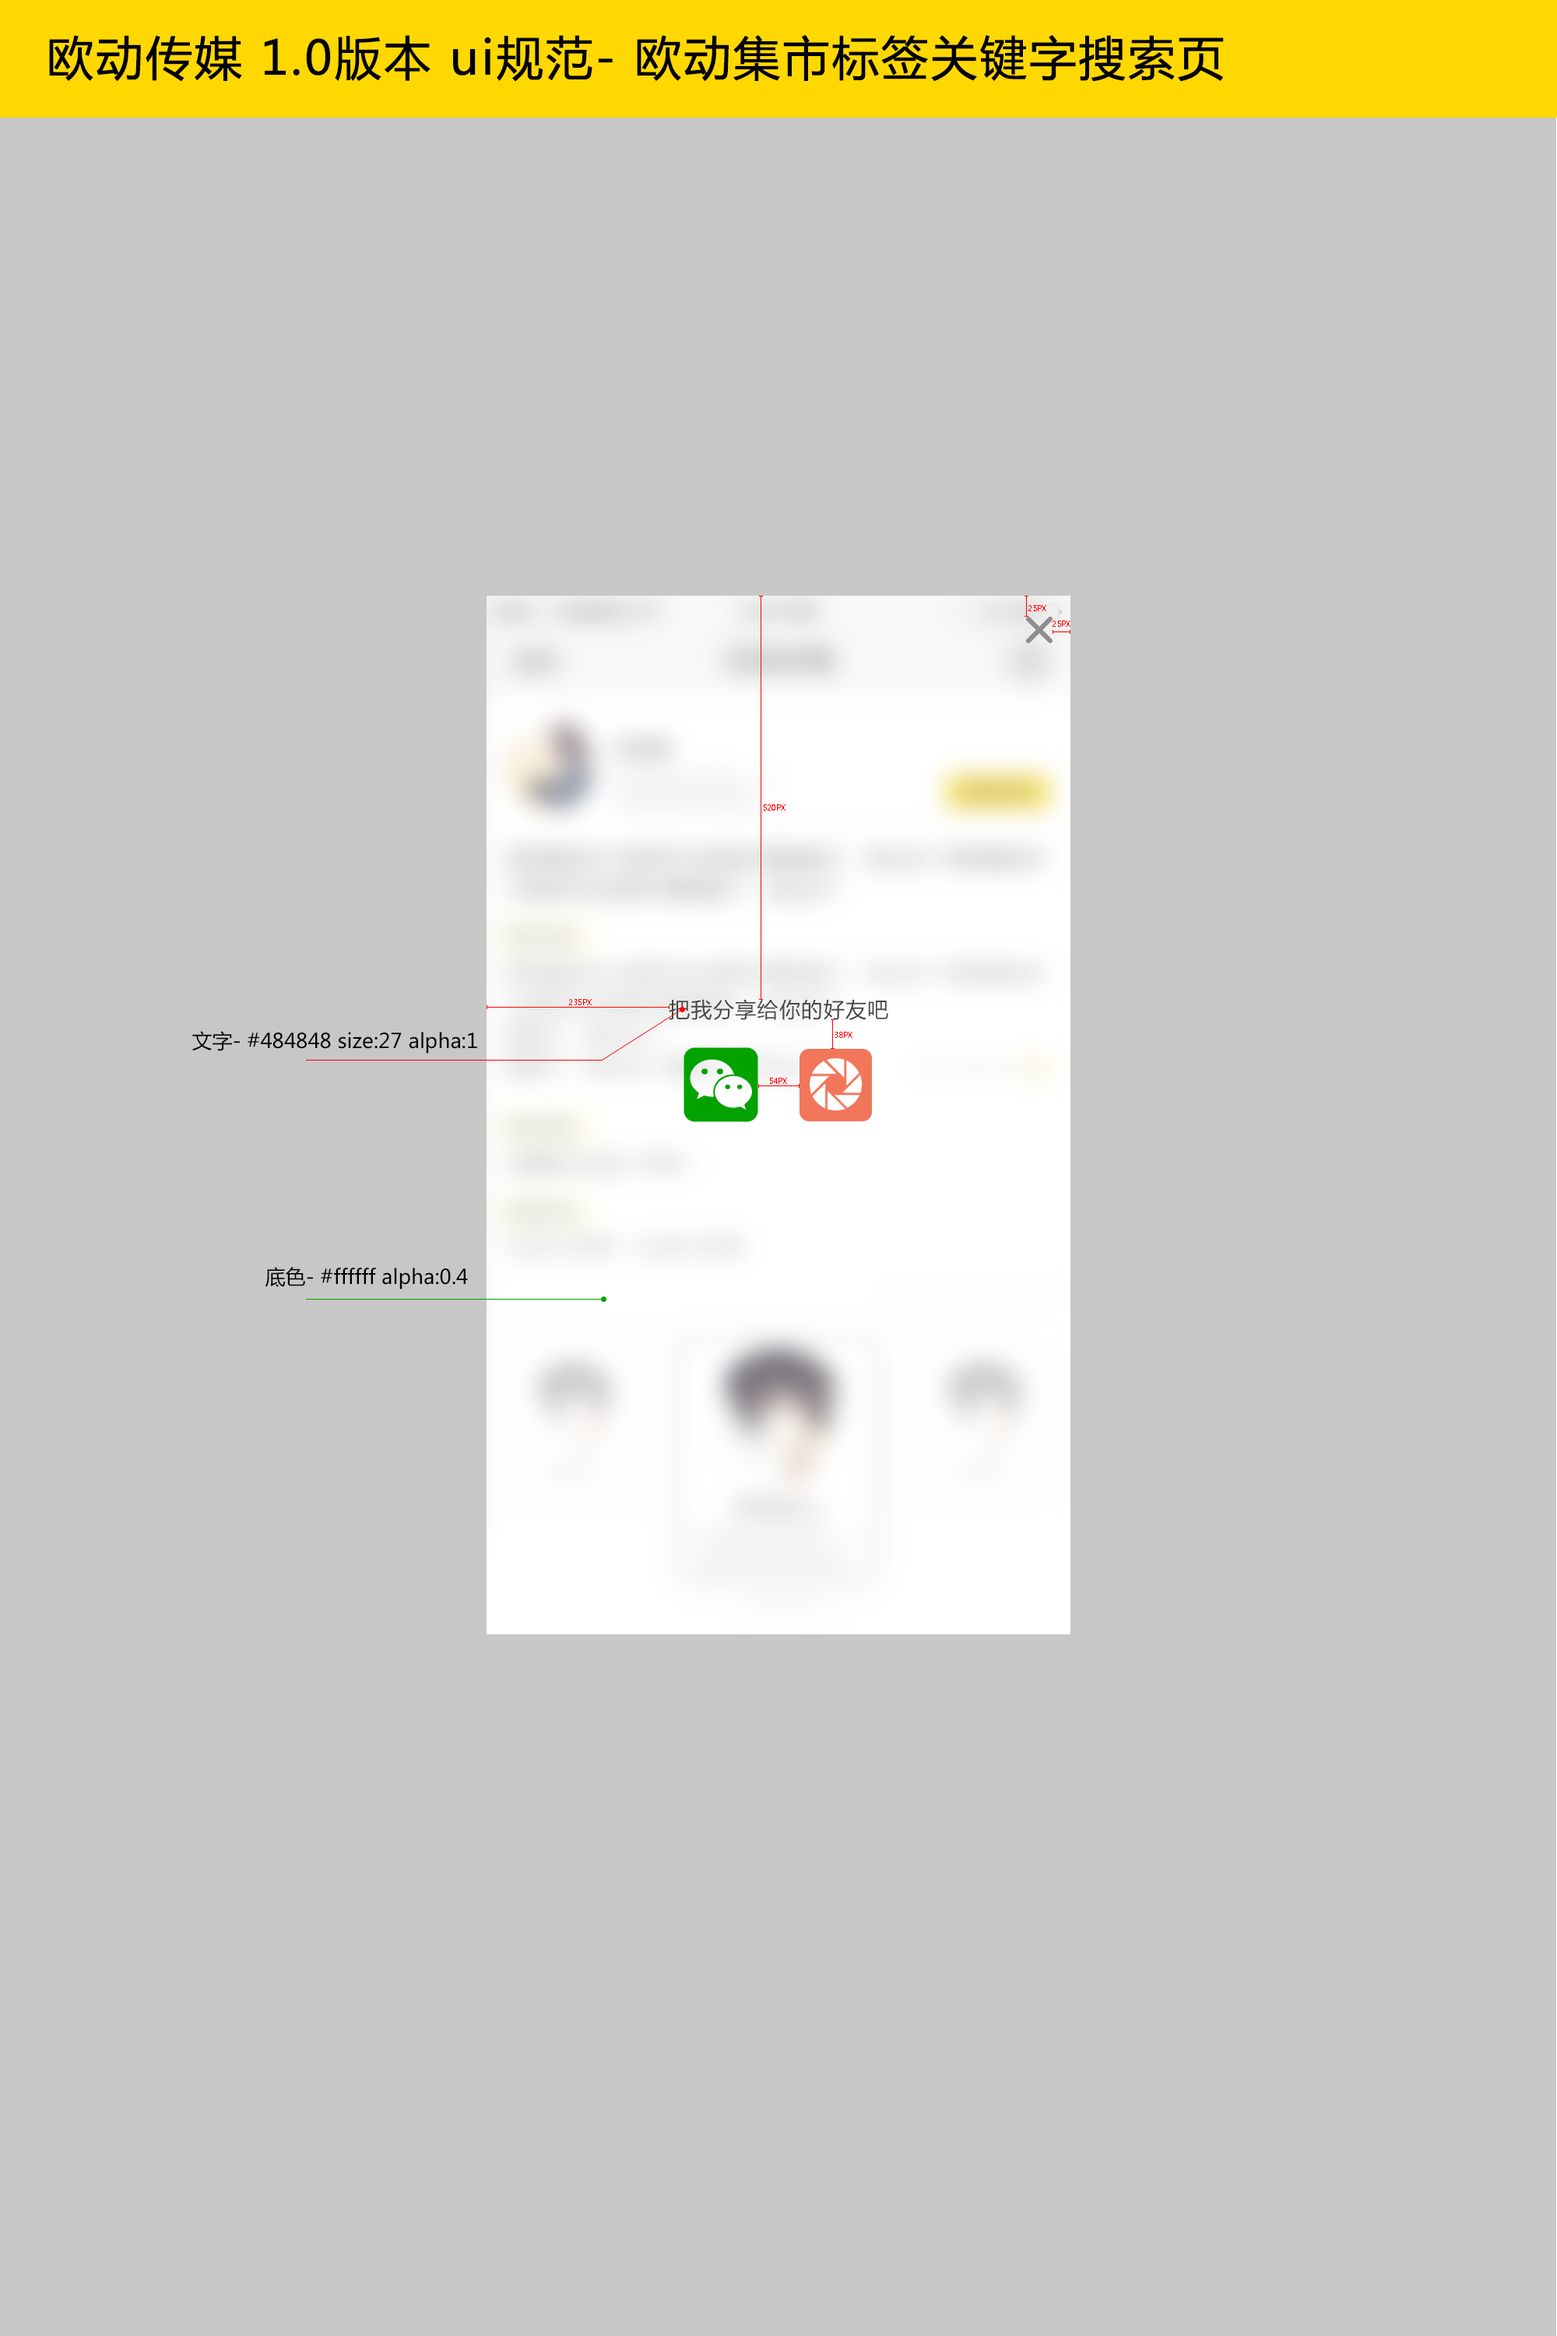
<style>
.page{position:relative;width:1557px;height:2336px;background:#c7c7c7}
.page>*{position:absolute;margin:0}
.t1{font:46.7px "MicrosoftYaHei";letter-spacing:0.03em;color:#000000;font-weight:bold}
.t2{font:7.7px "MicrosoftYaHei";color:#fe0000;scale:0.96 1}
.t3{font:20.2px "MicrosoftYaHei";color:#000000}
</style>
<div class="page">
<p class="t1" style="left:49px;top:35px;width:1175px;height:47px">欧动传媒 1.0版本 ui规范- 欧动集市标签关键字搜索页</p>
<p class="t2" style="left:1029px;top:605px;width:18px;height:6px">25PX</p>
<p class="t2" style="left:1053px;top:621px;width:18px;height:6px">25PX</p>
<p class="t2" style="left:764px;top:804px;width:22px;height:7px">520PX</p>
<p class="t2" style="left:569px;top:999px;width:23px;height:6px">235PX</p>
<p class="t3" style="left:192px;top:1031px;width:285px;height:23px">文字- #484848 size:27 alpha:1</p>
<p class="t2" style="left:836px;top:1032px;width:17px;height:6px">38PX</p>
<p class="t2" style="left:770px;top:1078px;width:17px;height:6px">54PX</p>
<p class="t3" style="left:266px;top:1267px;width:202px;height:23px">底色- #ffffff alpha:0.4</p>
</div>
